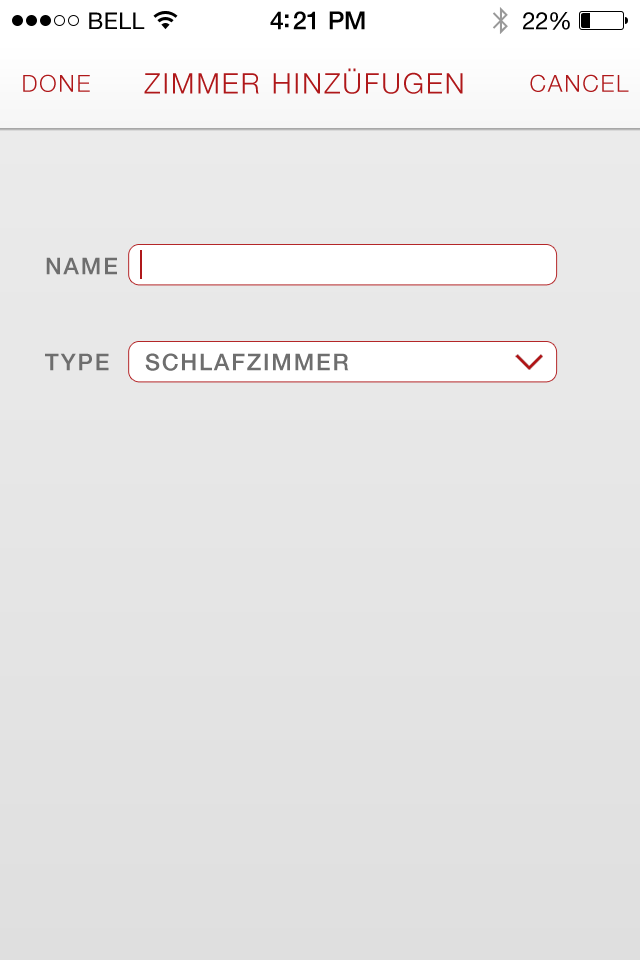
<style>
.page{position:relative;width:640px;height:960px}
.page>*{position:absolute;margin:0}
.t1{font:23px "HelveticaNeue";letter-spacing:0.02em;color:#000000}
.t2{font:25px "HelveticaNeue-Medium";letter-spacing:-0.02em;color:#000000}
.t3{font:24px "HelveticaNeue";letter-spacing:-0.02em;color:#000000}
.t4{font:23.4px "HelveticaNeue-Light";letter-spacing:0.08em;color:#af181a}
.t5{font:28.4px "HelveticaNeue-Light";letter-spacing:0.08em;color:#af181a}
.t6{font:23.1px "HelveticaNeue-Medium";letter-spacing:0.08em;color:#6e6e6e}
</style>
<div class="page">
<p class="t1" style="left:89px;top:12px;width:56px;height:17px">BELL</p>
<p class="t2" style="left:270px;top:11px;width:95px;height:19px">4:21 PM</p>
<p class="t3" style="left:522px;top:11px;width:48px;height:19px">22%</p>
<p class="t4" style="left:23px;top:74px;width:67px;height:18px">DONE</p>
<p class="t5" style="left:144px;top:68px;width:319px;height:26px">ZIMMER HINZÜFUGEN</p>
<p class="t4" style="left:530px;top:74px;width:99px;height:18px">CANCEL</p>
<p class="t6" style="left:46px;top:257px;width:71px;height:18px">NAME</p>
<p class="t6" style="left:45px;top:353px;width:64px;height:18px">TYPE</p>
<p class="t6" style="left:145px;top:353px;width:204px;height:18px">SCHLAFZIMMER</p>
</div>
